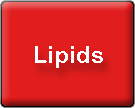
<style>
.page{position:relative;width:135px;height:108px;background:#e11d1d}
.page>*{position:absolute;margin:0}
.t1{font:24px "ArialRoundedMTBold";color:#ffffff}
</style>
<div class="page">
<p class="t1" style="left:35px;top:46px;width:68px;height:22px">Lipids</p>
</div>
